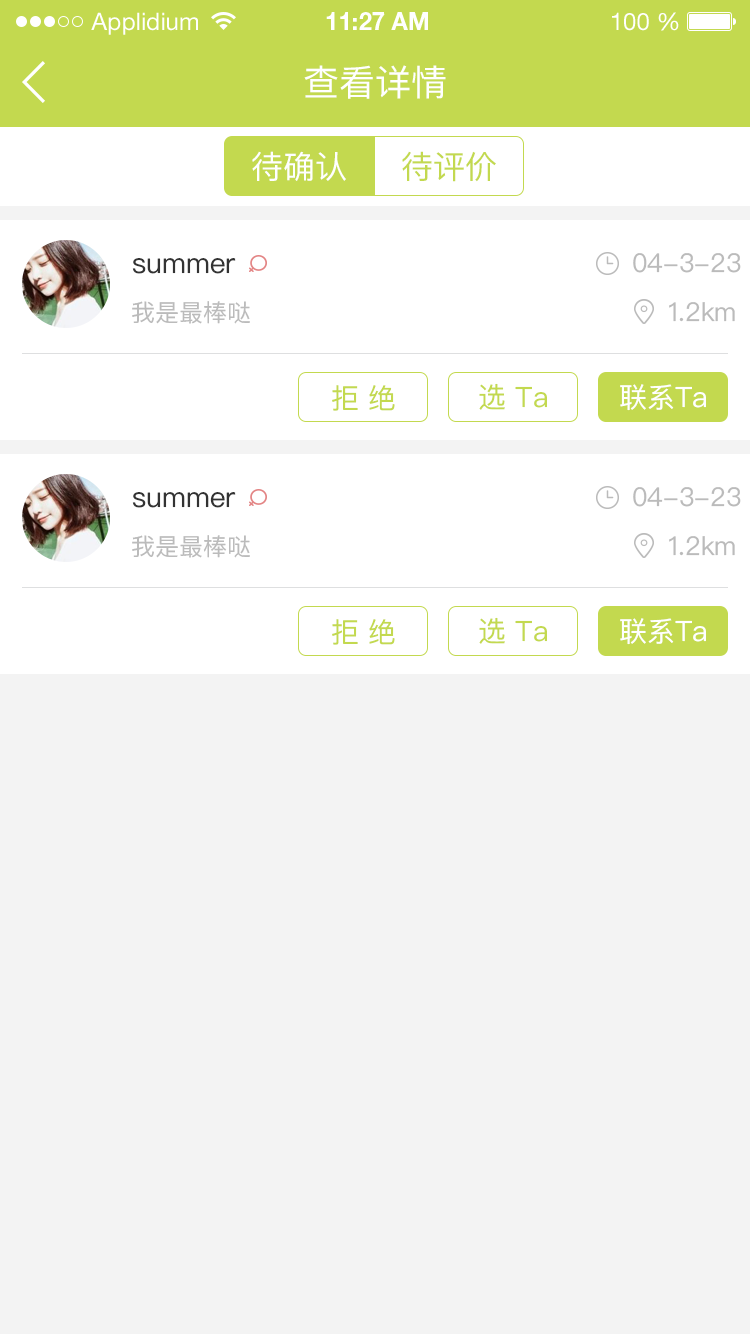
<style>
.page{position:relative;width:750px;height:1334px;background:#f3f3f3}
.page>*{position:absolute;margin:0}
.t1{font:24px "HelveticaNeueLTStd-Roman";color:#ffffff}
.t2{font:24px "HelveticaNeueLTStd-Bd";color:#ffffff}
.t3{font:36px "PingFangSC-Regular";color:#ffffff}
.t4{font:32px "PingFangSC-Regular";color:#ffffff}
.t5{font:32px "PingFangSC-Regular";color:#c3d94f}
.t6{font:26px "PingFangSC-Regular";color:#bbbbbb}
.t7{font:28px "PingFangSC-Regular";color:#333333}
.t8{font:24px "PingFangSC-Regular";color:#bbbbbb}
.t9{font:28px "PingFangSC-Regular";color:#c3d94f}
.t10{font:28px "PingFangSC-Regular";color:#ffffff}
</style>
<div class="page">
<p class="t1" style="left:91px;top:12px;width:107px;height:23px">Applidium</p>
<p class="t2" style="left:326px;top:12px;width:102px;height:18px">11:27 AM</p>
<p class="t1" style="left:612px;top:12px;width:67px;height:19px">100 %</p>
<p class="t3" style="left:304px;top:65px;width:142px;height:34px">查看详情</p>
<p class="t4" style="left:252px;top:151px;width:94px;height:30px">待确认</p>
<p class="t5" style="left:402px;top:151px;width:94px;height:31px">待评价</p>
<p class="t6" style="left:633px;top:253px;width:108px;height:20px">04-3-23</p>
<p class="t7" style="left:132px;top:258px;width:104px;height:16px">summer</p>
<p class="t8" style="left:132px;top:301px;width:118px;height:23px">我是最棒哒</p>
<p class="t6" style="left:669px;top:302px;width:66px;height:20px">1.2km</p>
<p class="t9" style="left:332px;top:385px;width:63px;height:26px">拒 绝</p>
<p class="t9" style="left:479px;top:383px;width:68px;height:27px">选 Ta</p>
<p class="t10" style="left:620px;top:384px;width:86px;height:27px">联系Ta</p>
<p class="t7" style="left:132px;top:492px;width:104px;height:16px">summer</p>
<p class="t6" style="left:633px;top:487px;width:108px;height:20px">04-3-23</p>
<p class="t8" style="left:132px;top:535px;width:118px;height:23px">我是最棒哒</p>
<p class="t6" style="left:669px;top:536px;width:66px;height:20px">1.2km</p>
<p class="t9" style="left:479px;top:617px;width:68px;height:27px">选 Ta</p>
<p class="t9" style="left:332px;top:619px;width:63px;height:26px">拒 绝</p>
<p class="t10" style="left:620px;top:618px;width:86px;height:27px">联系Ta</p>
</div>
